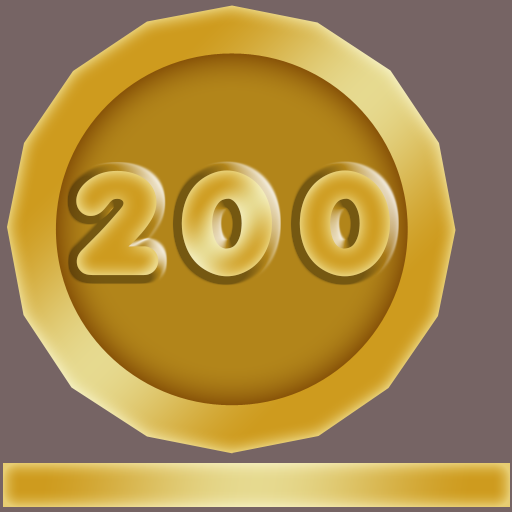
<style>
.page{position:relative;width:512px;height:512px;background:#766464}
.page>*{position:absolute;margin:0}
.t1{font:141.6px "Anja-Eliane-Nornal";letter-spacing:0.16em}
.t2{font:141.6px "Anja-Eliane-Nornal";letter-spacing:0.1em}
</style>
<div class="page">
<p class="t1" style="left:76px;top:170px;width:314px;height:107px"><span class="t2">2</span>00</p>
</div>
